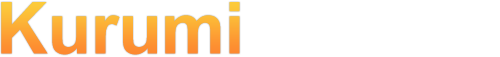
<style>
.page{position:relative;width:500px;height:57px;background:#ffffff}
.page>*{position:absolute;margin:0}
.t1{font:72px "Arial-BoldMT";letter-spacing:-0.01em}
</style>
<div class="page">
<p class="t1" style="left:1px;top:2px;width:239px;height:53px">Kurumi</p>
</div>
